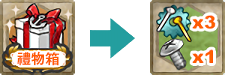
<style>
.page{position:relative;width:225px;height:75px;background:#ffffff}
.page>*{position:absolute;margin:0}
.t1{font:14px "GothicMB101Pr6N-Medium";color:#ff5a00}
</style>
<div class="page">
<p class="t1" style="left:17px;top:51px;width:43px;height:15px">禮物箱</p>
</div>
